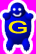
<style>
.page{position:relative;width:36px;height:54px}
.page>*{position:absolute;margin:0}
.t1{font:16.7px "ArialMT";color:#ffea00;font-weight:bold;scale:1.54 1}
</style>
<div class="page">
<p class="t1" style="left:8px;top:20px;width:19px;height:14px">G</p>
</div>
